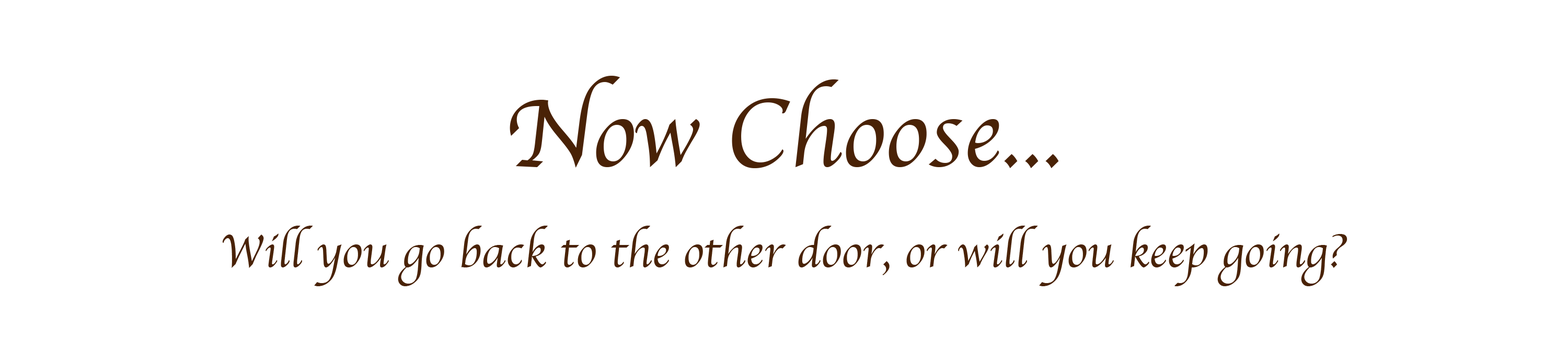
<style>
.page{position:relative;width:1568px;height:363px;background:#ffffff}
.page>*{position:absolute;margin:0}
.t1{font:100.4px "Apple-Chancery";color:#492206}
.t2{font:47.7px "Apple-Chancery";color:#492206}
</style>
<div class="page">
<p class="t1" style="left:510px;top:76px;width:549px;height:92px">Now Choose...</p>
<p class="t2" style="left:222px;top:226px;width:1125px;height:60px">Will you go back to the other door, or will you keep going?</p>
</div>
